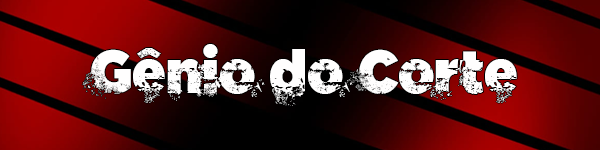
<style>
.page{position:relative;width:600px;height:150px}
.page>*{position:absolute;margin:0}
.t1{font:56px "C.A.Gatintas";color:#fffefe}
</style>
<div class="page">
<p class="t1" style="left:82px;top:44px;width:435px;height:62px">Gênio do Corte</p>
</div>
